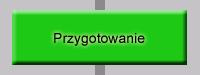
<style>
.page{position:relative;width:200px;height:75px;background:#1ec915}
.page>*{position:absolute;margin:0}
.t1{font:14px "ArialMT";color:#000000}
</style>
<div class="page">
<p class="t1" style="left:54px;top:33px;width:91px;height:13px">Przygotowanie</p>
</div>
